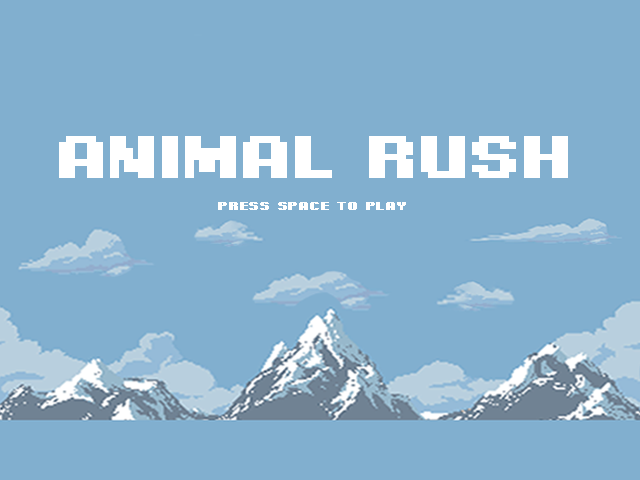
<style>
.page{position:relative;width:640px;height:480px;background:#81afcf}
.page>*{position:absolute;margin:0}
.t1{font:60.3px "PixelDigivolve";color:#ffffff;font-weight:bold;scale:1.2 1}
.t2{font:11.7px "PixelDigivolve";color:#ffffff;font-weight:bold;scale:1.2 1}
</style>
<div class="page">
<p class="t1" style="left:59px;top:136px;width:509px;height:42px">Animal rush</p>
<p class="t2" style="left:218px;top:202px;width:188px;height:8px">press Space to Play</p>
</div>
